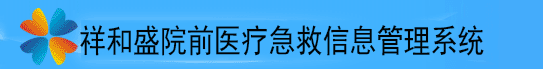
<style>
.page{position:relative;width:543px;height:69px;background:#41b2fe}
.page>*{position:absolute;margin:0}
.t1{font:32.4px "SimHei";color:#000406;scale:0.83 1}
</style>
<div class="page">
<p class="t1" style="left:80px;top:25px;width:404px;height:31px">祥和盛院前医疗急救信息管理系统</p>
</div>
